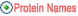
<style>
.page{position:relative;width:78px;height:16px;background:#ffffff}
.page>*{position:absolute;margin:0}
.t1{font:12px "ArialMT";color:#fa5f5f;font-weight:bold;scale:0.75 1}
.t2{font:12px "Wingdings2";color:#fa5f5f;font-weight:bold;scale:0.75 1}
</style>
<div class="page">
<p class="t1" style="left:4px;top:2px;width:73px;height:14px"><span class="t2">P</span> Protein Names</p>
</div>
